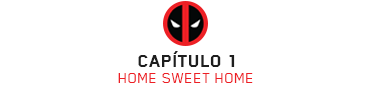
<style>
.page{position:relative;width:372px;height:90px;background:#ffffff}
.page>*{position:absolute;margin:0}
.t1{font:20px "BlenderPro-Heavy";letter-spacing:0.02em;color:#1e1e1e;text-transform:uppercase}
.t2{font:17px "BlenderPro-Book";letter-spacing:0.02em;color:#ed1e24;text-transform:uppercase}
</style>
<div class="page">
<p class="t1" style="left:138px;top:51px;width:97px;height:16px">Capítulo 1</p>
<p class="t2" style="left:118px;top:73px;width:135px;height:10px">Home Sweet Home</p>
</div>
